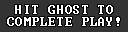
<style>
.page{position:relative;width:128px;height:32px;background:#333333}
.page>*{position:absolute;margin:0}
.t1{font:12px/11.9px "Terminal";letter-spacing:0.075em;color:#ffffff}
</style>
<div class="page">
<p class="t1" style="left:7px;top:5px;width:113px;height:21px;text-align:center">HIT GHOST TO<br>COMPLETE PLAY!</p>
</div>
